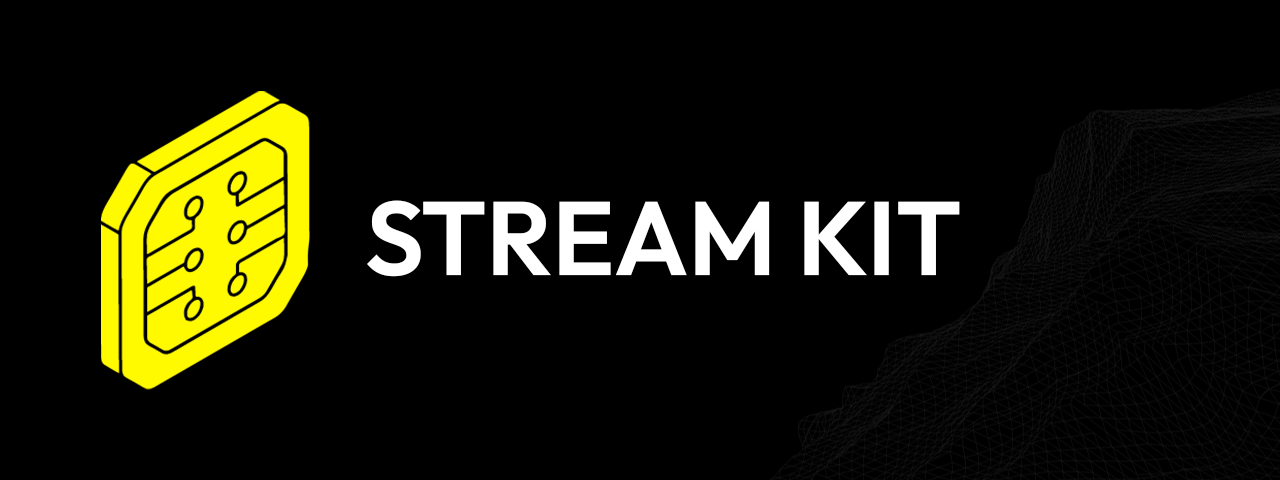
<style>
.page{position:relative;width:1280px;height:480px;background:#000000}
.page>*{position:absolute;margin:0}
.t1{font:104.2px "Outfit-SemiBold";color:#ffffff}
</style>
<div class="page">
<p class="t1" style="left:367px;top:200px;width:593px;height:77px">STREAM KIT</p>
</div>
